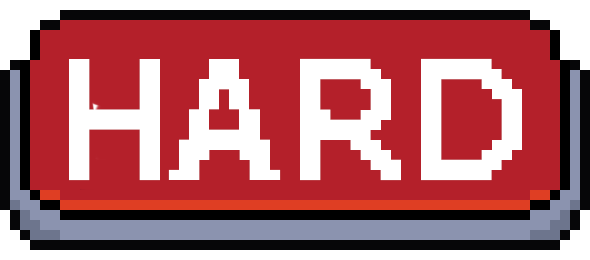
<style>
.page{position:relative;width:590px;height:260px;background:#b4202a}
.page>*{position:absolute;margin:0}
.t1{font:161px "NicoClean-Regular";color:#ffffff}
</style>
<div class="page">
<p class="t1" style="left:69px;top:58px;width:453px;height:123px">HARD</p>
</div>
